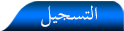
<style>
.page{position:relative;width:124px;height:31px}
.page>*{position:absolute;margin:0}
.t1{font:26px "TraditionalArabic";letter-spacing:-0.08em;color:#fbfcfc}
</style>
<div class="page">
<p class="t1" style="left:41px;top:5px;width:56px;height:22px">ا   لتسجيل</p>
</div>
